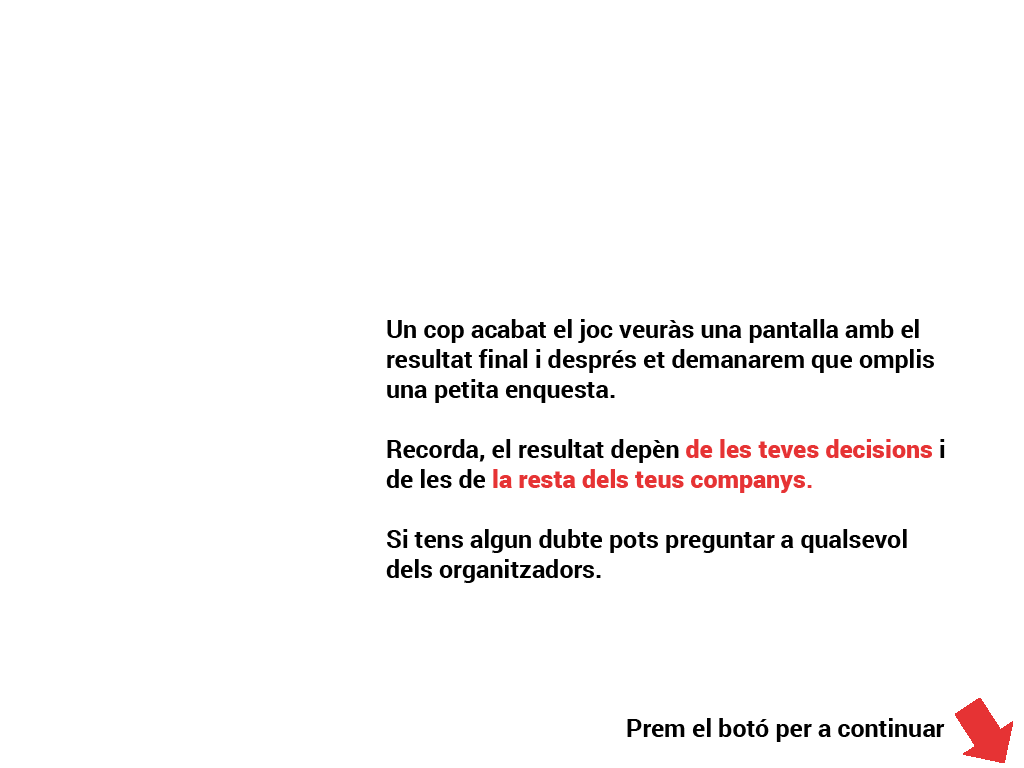
<style>
.page{position:relative;width:1024px;height:768px;background:#ffffff}
.page>*{position:absolute;margin:0}
.t1{font:25px "Roboto-Bold";color:#000000}
.t2{font:25px "Roboto-Black";color:#e63334}
.t3{font:25px "Roboto-Bold";color:#e63334}
</style>
<div class="page">
<p class="t1" style="left:386px;top:319px;width:559px;height:264px">Un cop acabat el joc veuràs una pantalla amb el <br>resultat final i després et demanarem que omplis<br>una petita enquesta.<br><br>Recorda, el resultat depèn <span class="t2">de les teves decisions </span>i <br>de les de <span class="t2">la resta dels teus companys</span><span class="t3">.<br></span><br>Si tens algun dubte pots preguntar a qualsevol<br>dels organitzadors.</p>
<p class="t1" style="left:627px;top:718px;width:318px;height:24px">Prem el botó per a continuar</p>
</div>
